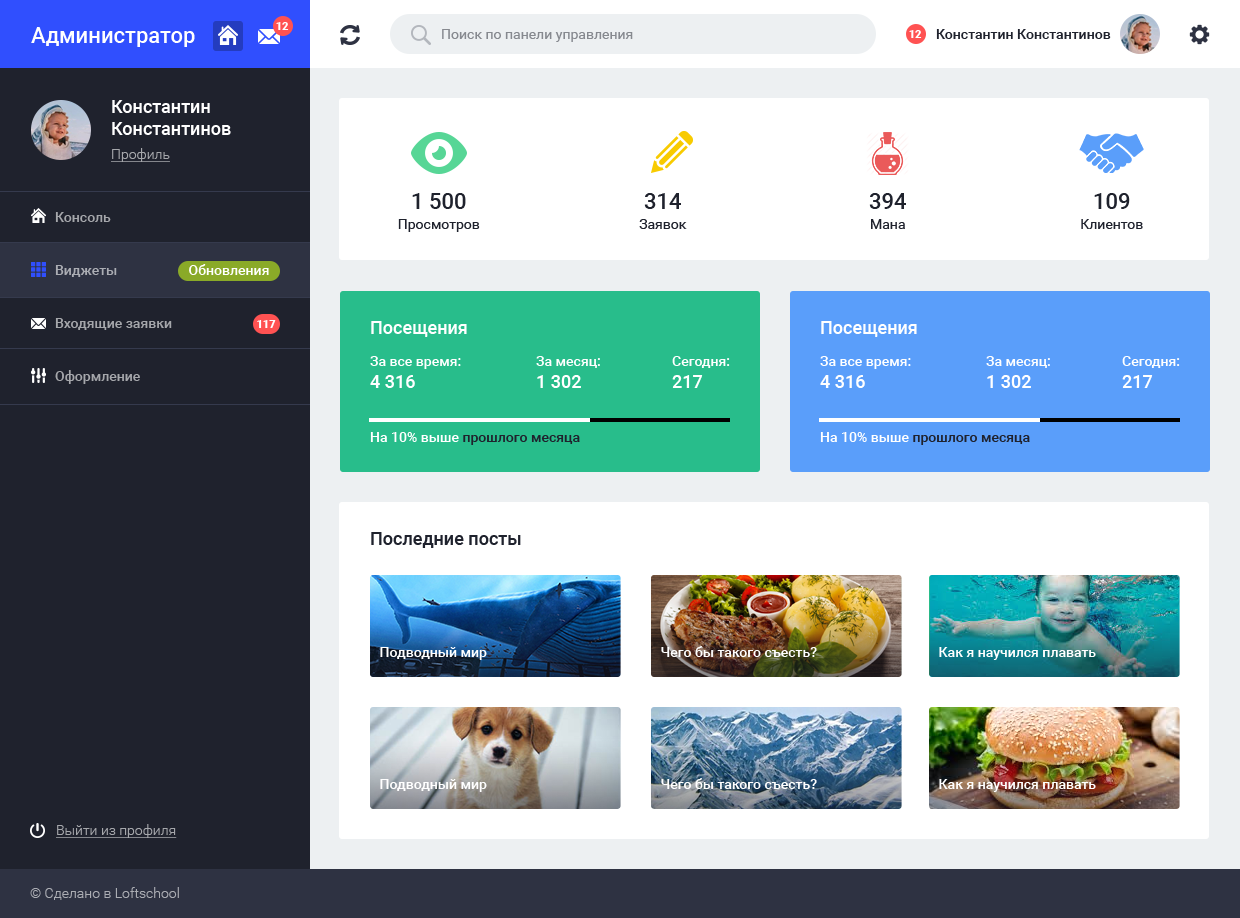
<style>
.page{position:relative;width:1240px;height:918px;background:#ffffff}
.page>*{position:absolute;margin:0}
.t1{font:22px "Roboto-Medium";color:#ffffff}
.t2{font:11px "Roboto-Black";color:#ffffff}
.t3{font:14px "Roboto-Regular";color:#86898f}
.t4{font:14px "Roboto-Medium";color:#1f222d}
.t5{font:18px/22px "Roboto-Medium";color:#ffffff}
.t6{font:14px "Roboto-Light";color:#a5a7ab;text-decoration:underline}
.t7{font:14px/20px "Roboto-Regular";color:#1f222d}
.t8{font:22px/20px "Roboto-Medium";color:#1f222d}
.t9{font:14px "Roboto-Medium";color:#a5a7ab}
.t10{font:14px "Roboto-Medium";color:#abadb3}
.t11{font:14px "Roboto-Medium";color:#ffffff}
.t12{font:18px "Roboto-Medium";color:#ffffff}
.t13{font:14px/22px "Roboto-Medium";color:#ffffff}
.t14{font:18px "Roboto-Medium";color:#1f222d}
.t15{font:14px "Roboto-Light";color:#abadb3}
</style>
<div class="page">
<p class="t1" style="left:31px;top:27px;width:164px;height:20px">Администратор</p>
<p class="t2" style="left:276px;top:22px;width:13px;height:8px">12</p>
<p class="t3" style="left:442px;top:29px;width:191px;height:13px">Поиск по панели управления</p>
<p class="t2" style="left:909px;top:30px;width:13px;height:8px">12</p>
<p class="t4" style="left:936px;top:29px;width:175px;height:10px">Константин Константинов</p>
<p class="t5" style="left:112px;top:100px;width:119px;height:35px">Константин<br>Константинов</p>
<p class="t6" style="left:111px;top:148px;width:59px;height:14px">Профиль</p>
<p class="t7" style="left:398px;top:193px;width:82px;height:39px;text-align:center"><span class="t8">1 500<br></span>Просмотров</p>
<p class="t7" style="left:639px;top:193px;width:48px;height:36px;text-align:center"><span class="t8">314<br></span>Заявок</p>
<p class="t7" style="left:869px;top:193px;width:37px;height:36px;text-align:center"><span class="t8">394<br></span>Мана</p>
<p class="t7" style="left:1081px;top:193px;width:62px;height:36px;text-align:center"><span class="t8">109<br></span>Клиентов</p>
<p class="t9" style="left:55px;top:212px;width:56px;height:10px">Консоль</p>
<p class="t10" style="left:55px;top:265px;width:62px;height:12px">Виджеты</p>
<p class="t11" style="left:189px;top:264px;width:80px;height:11px">Обновления</p>
<p class="t9" style="left:55px;top:318px;width:117px;height:12px">Входящие заявки</p>
<p class="t2" style="left:257px;top:320px;width:19px;height:8px">117</p>
<p class="t12" style="left:371px;top:321px;width:96px;height:16px">Посещения</p>
<p class="t12" style="left:821px;top:321px;width:96px;height:16px">Посещения</p>
<p class="t13" style="left:370px;top:356px;width:91px;height:32px">За все время:<br><span class="t5">4 316</span></p>
<p class="t13" style="left:536px;top:356px;width:64px;height:32px">За месяц:<br><span class="t5">1 302</span></p>
<p class="t13" style="left:672px;top:356px;width:58px;height:32px">Сегодня:<br><span class="t5">217</span></p>
<p class="t13" style="left:820px;top:356px;width:91px;height:32px">За все время:<br><span class="t5">4 316</span></p>
<p class="t13" style="left:986px;top:356px;width:64px;height:32px">За месяц:<br><span class="t5">1 302</span></p>
<p class="t13" style="left:1122px;top:356px;width:58px;height:32px">Сегодня:<br><span class="t5">217</span></p>
<p class="t9" style="left:55px;top:370px;width:85px;height:14px">Оформление</p>
<p class="t4" style="left:370px;top:432px;width:210px;height:13px"><span class="t11">На 10% выше </span>прошлого месяца</p>
<p class="t4" style="left:820px;top:432px;width:210px;height:13px"><span class="t11">На 10% выше </span>прошлого месяца</p>
<p class="t14" style="left:371px;top:532px;width:150px;height:16px">Последние посты</p>
<p class="t11" style="left:380px;top:647px;width:107px;height:13px">Подводный мир</p>
<p class="t11" style="left:661px;top:646px;width:156px;height:11px">Чего бы такого съесть?</p>
<p class="t11" style="left:939px;top:647px;width:157px;height:13px">Как я научился плавать</p>
<p class="t11" style="left:380px;top:779px;width:107px;height:13px">Подводный мир</p>
<p class="t11" style="left:661px;top:778px;width:156px;height:11px">Чего бы такого съесть?</p>
<p class="t11" style="left:939px;top:779px;width:157px;height:13px">Как я научился плавать</p>
<p class="t6" style="left:56px;top:824px;width:121px;height:14px">Выйти из профиля</p>
<p class="t15" style="left:30px;top:887px;width:149px;height:13px">© Сделано в Loftschool</p>
</div>
